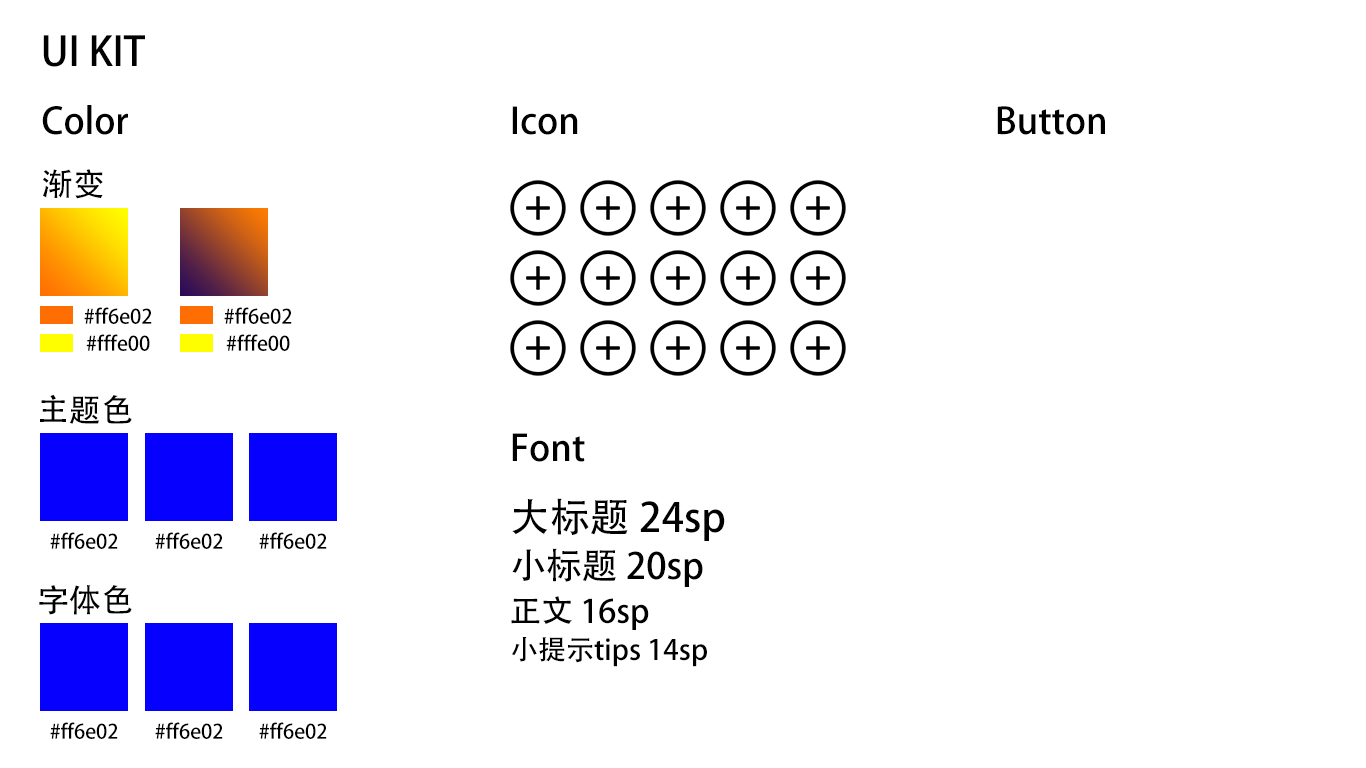
<style>
.page{position:relative;width:1366px;height:768px;background:#ffffff}
.page>*{position:absolute;margin:0}
.t1{font:40px "AdobeHeitiStd-Regular";color:#000000}
.t2{font:36px "AdobeHeitiStd-Regular";color:#000000}
.t3{font:32px "AdobeHeitiStd-Regular";color:#000000}
.t4{font:20px "AdobeHeitiStd-Regular";color:#000000}
.t5{font:28px "AdobeHeitiStd-Regular";color:#000000}
</style>
<div class="page">
<p class="t1" style="left:43px;top:35px;width:102px;height:32px">UI KIT</p>
<p class="t2" style="left:42px;top:105px;width:86px;height:30px">Color</p>
<p class="t2" style="left:512px;top:106px;width:66px;height:29px">Icon</p>
<p class="t2" style="left:997px;top:106px;width:108px;height:29px">Button</p>
<p class="t3" style="left:43px;top:169px;width:60px;height:30px">渐变</p>
<p class="t4" style="left:84px;top:307px;width:68px;height:17px">#ff6e02</p>
<p class="t4" style="left:224px;top:307px;width:68px;height:17px">#ff6e02</p>
<p class="t4" style="left:86px;top:334px;width:64px;height:17px">#fffe00</p>
<p class="t4" style="left:226px;top:334px;width:64px;height:17px">#fffe00</p>
<p class="t3" style="left:40px;top:394px;width:92px;height:30px">主题色</p>
<p class="t2" style="left:512px;top:433px;width:73px;height:29px">Font</p>
<p class="t1" style="left:512px;top:498px;width:213px;height:43px">大标题 24sp</p>
<p class="t4" style="left:50px;top:532px;width:68px;height:17px">#ff6e02</p>
<p class="t4" style="left:155px;top:532px;width:68px;height:17px">#ff6e02</p>
<p class="t4" style="left:259px;top:532px;width:68px;height:17px">#ff6e02</p>
<p class="t2" style="left:512px;top:548px;width:191px;height:39px">小标题 20sp</p>
<p class="t3" style="left:39px;top:585px;width:93px;height:30px">字体色</p>
<p class="t3" style="left:511px;top:596px;width:138px;height:34px">正文 16sp</p>
<p class="t5" style="left:512px;top:637px;width:195px;height:30px">小提示tips 14sp</p>
<p class="t4" style="left:50px;top:722px;width:68px;height:17px">#ff6e02</p>
<p class="t4" style="left:155px;top:722px;width:68px;height:17px">#ff6e02</p>
<p class="t4" style="left:259px;top:722px;width:68px;height:17px">#ff6e02</p>
</div>
